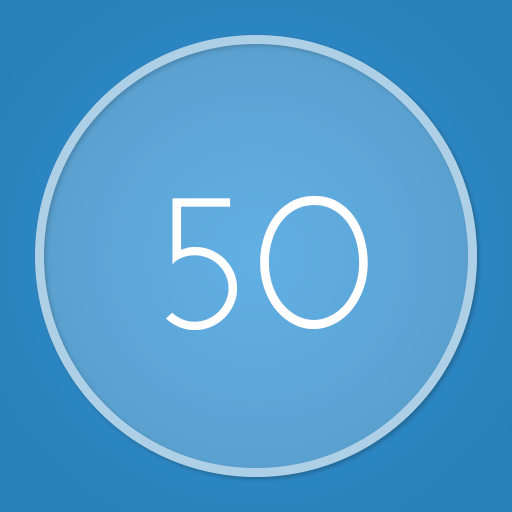
<style>
.page{position:relative;width:512px;height:512px}
.page>*{position:absolute;margin:0}
.t1{font:200px "JosefinSans";color:#ffffff}
</style>
<div class="page">
<p class="t1" style="left:166px;top:196px;width:202px;height:134px">50</p>
</div>
